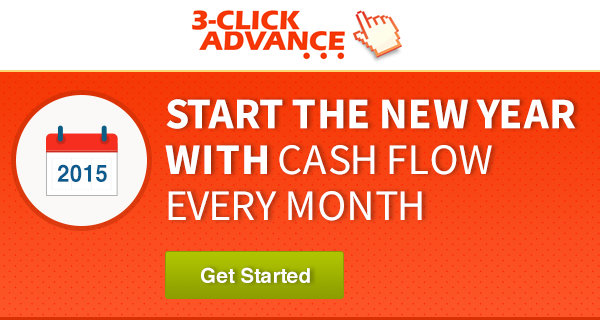
<style>
.page{position:relative;width:600px;height:320px;background:#ffffff}
.page>*{position:absolute;margin:0}
.t1{font:43.4px/45.9px "SourceSansPro-Bold";color:#ffffff;text-transform:uppercase}
.t2{font:43.4px/45.9px "SourceSansPro-Regular";color:#ffffff;text-transform:uppercase}
.t3{font:23.9px "Helvetica-Bold";color:#0c5b8e;text-transform:uppercase;scale:0.92 1}
.t4{font:20px "Helvetica-Bold";color:#ffffff}
</style>
<div class="page">
<p class="t1" style="left:165px;top:99px;width:411px;height:122px">Start the New Year<br>with <span class="t2">Cash Flow<br>Every Month</span></p>
<p class="t3" style="left:57px;top:164px;width:50px;height:18px">2015</p>
<p class="t4" style="left:201px;top:267px;width:109px;height:16px">Get Started</p>
</div>
